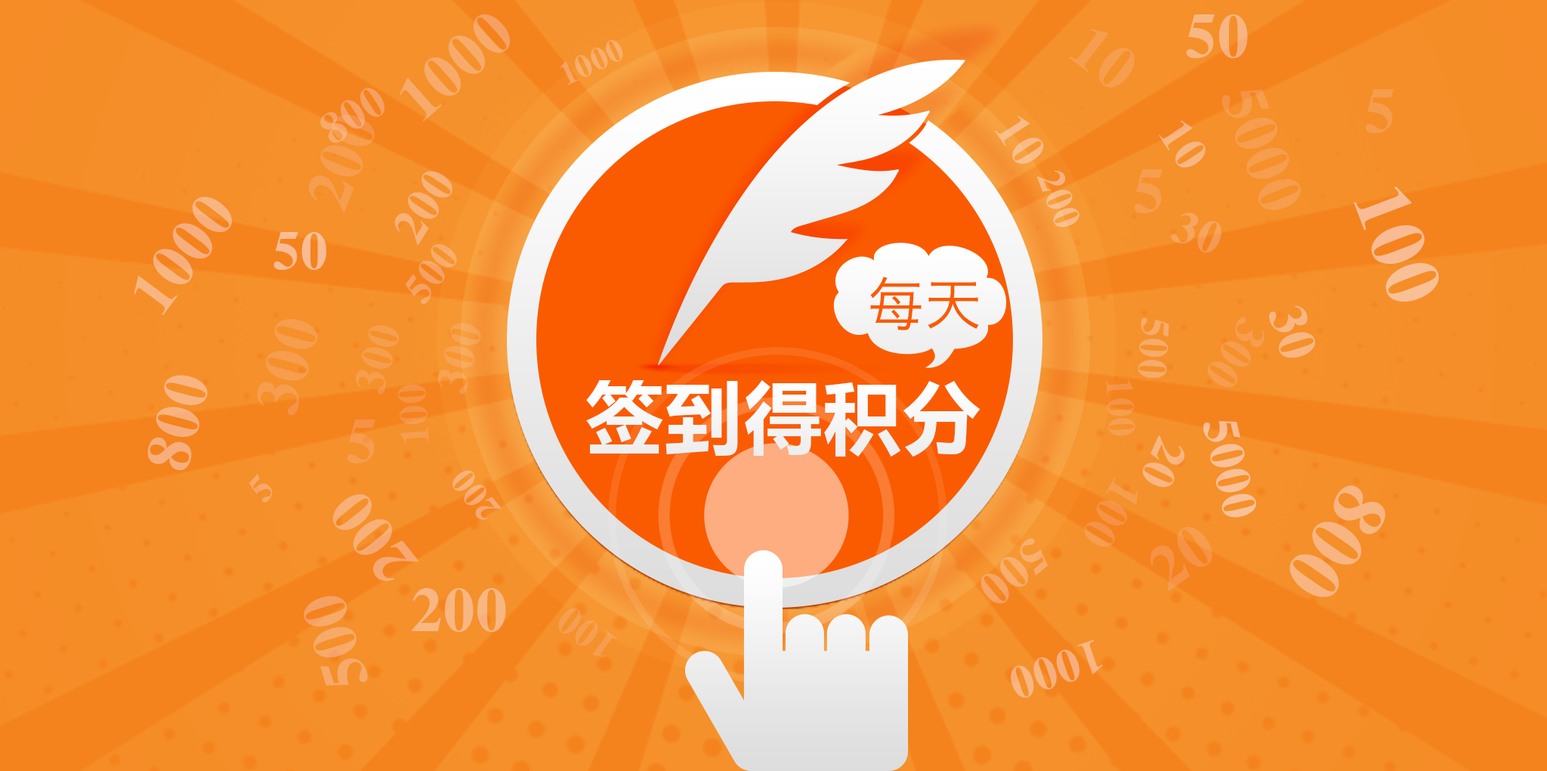
<style>
.page{position:relative;width:1547px;height:771px}
.page>*{position:absolute;margin:0}
.t1{font:62.5px "CTLaoSongSJ";letter-spacing:0.02em;color:#f7aa6a}
.t2{font:62.5px "CTLaoSongSJ";letter-spacing:0.02em;color:#f8b682}
.t3{font:62.5px "CTLaoSongSJ";letter-spacing:0.02em;color:#f69e4e}
.t4{font:32.4px "CTLaoSongSJ";letter-spacing:0.02em;color:#f8af6d}
.t5{font:44.4px "CTLaoSongSJ";letter-spacing:0.02em;color:#f6a063}
.t6{font:62.5px "CTLaoSongSJ";letter-spacing:0.02em;color:#f69d4e}
.t7{font:62.5px "CTLaoSongSJ";letter-spacing:0.02em;color:#f69c4d}
.t8{font:48px "CTLaoSongSJ";letter-spacing:0.02em;color:#f9ba85}
.t9{font:47px "CTLaoSongSJ";letter-spacing:0.02em;color:#f8b682}
.t10{font:48.4px "CTLaoSongSJ";letter-spacing:0.02em;color:#f8b177}
.t11{font:38.2px "CTLaoSongSJ";letter-spacing:0.02em;color:#f9ba85}
.t12{font:62.5px "CTLaoSongSJ";letter-spacing:0.02em;color:#f69e4f}
.t13{font:62.5px "CTLaoSongSJ";letter-spacing:0.02em;color:#f7ae7d}
.t14{font:78.2px "CTLaoSongSJ";letter-spacing:0.02em;color:#f8bb93}
.t15{font:46.8px "CTLaoSongSJ";letter-spacing:0.02em;color:#f7a45d}
.t16{font:54.1px "CTLaoSongSJ";letter-spacing:0.02em;color:#f8bb93}
.t17{font:40.9px "CTLaoSongSJ";letter-spacing:0.02em;color:#f6a264}
.t18{font:57.3px "HiraginoSansGB-W3";letter-spacing:0.02em;color:#fa5b00}
.t19{font:53.1px "CTLaoSongSJ";letter-spacing:0.02em;color:#f8b682}
.t20{font:40.7px "CTLaoSongSJ";letter-spacing:0.02em;color:#f7aa6a}
.t21{font:46.5px "CTLaoSongSJ";letter-spacing:0.02em;color:#f69d4e}
.t22{font:44.4px "CTLaoSongSJ";letter-spacing:0.02em;color:#f69e4e}
.t23{font:44.5px "CTLaoSongSJ";letter-spacing:0.02em;color:#f7a353}
.t24{font:40.1px "CTLaoSongSJ";letter-spacing:0.02em;color:#f59246}
.t25{font:78.8px "MicrosoftYaHei-Bold";letter-spacing:0.02em;color:#ffffff}
.t26{font:38.3px "CTLaoSongSJ";letter-spacing:0.02em;color:#f69e4f}
.t27{font:49.6px "CTLaoSongSJ";letter-spacing:0.02em;color:#f9c197}
.t28{font:47.5px "CTLaoSongSJ";letter-spacing:0.02em;color:#f8b682}
.t29{font:37.4px "CTLaoSongSJ";letter-spacing:0.02em;color:#f7a969}
.t30{font:35.5px "CTLaoSongSJ";letter-spacing:0.02em;color:#f8ac74}
.t31{font:46.7px "CTLaoSongSJ";letter-spacing:0.02em;color:#f59246}
.t32{font:77px "CTLaoSongSJ";letter-spacing:0.02em;color:#f8b581}
.t33{font:62.5px "CTLaoSongSJ";letter-spacing:0.02em;color:#f8b076}
.t34{font:62.5px "CTLaoSongSJ";letter-spacing:0.02em;color:#f59246}
.t35{font:48.4px "CTLaoSongSJ";letter-spacing:0.02em;color:#f7ab6a}
.t36{font:62.5px "CTLaoSongSJ";letter-spacing:0.02em;color:#f7a969}
.t37{font:40.1px "CTLaoSongSJ";letter-spacing:0.02em;color:#f69e4f}
.t38{font:47px "CTLaoSongSJ";letter-spacing:0.02em;color:#f8b27f}
</style>
<div class="page">
<p class="t1" style="left:400px;top:14px;width:110px;height:108px;rotate:-41deg">1000</p>
<p class="t2" style="left:1186px;top:14px;width:62px;height:44px">50</p>
<p class="t3" style="left:1069px;top:29px;width:66px;height:59px;rotate:38deg">10</p>
<p class="t4" style="left:559px;top:40px;width:64px;height:45px;rotate:-26deg">1000</p>
<p class="t5" style="left:320px;top:88px;width:65px;height:55px;rotate:-33deg">800</p>
<p class="t6" style="left:1222px;top:89px;width:79px;height:121px;rotate:69deg">5000</p>
<p class="t7" style="left:1365px;top:89px;width:29px;height:44px">5</p>
<p class="t6" style="left:308px;top:115px;width:67px;height:97px;rotate:-69deg">200</p>
<p class="t8" style="left:995px;top:116px;width:49px;height:48px;rotate:56deg">10</p>
<p class="t9" style="left:1159px;top:120px;width:47px;height:48px;rotate:57deg">10</p>
<p class="t10" style="left:394px;top:171px;width:59px;height:75px;rotate:-58deg">200</p>
<p class="t11" style="left:1037px;top:170px;width:43px;height:57px;rotate:69deg">200</p>
<p class="t12" style="left:1134px;top:169px;width:29px;height:44px">5</p>
<p class="t13" style="left:134px;top:196px;width:98px;height:119px;rotate:-53deg">1000</p>
<p class="t14" style="left:1354px;top:187px;width:85px;height:114px;rotate:69deg">100</p>
<p class="t15" style="left:1171px;top:212px;width:51px;height:41px;rotate:21deg">30</p>
<p class="t16" style="left:274px;top:232px;width:52px;height:38px">50</p>
<p class="t17" style="left:405px;top:244px;width:52px;height:60px;rotate:-53deg">500</p>
<p class="t18" style="left:870px;top:277px;width:109px;height:53px">每天</p>
<p class="t19" style="left:1269px;top:305px;width:46px;height:53px;rotate:72deg">30</p>
<p class="t20" style="left:1138px;top:317px;width:32px;height:61px;rotate:93deg">500</p>
<p class="t21" style="left:1207px;top:317px;width:58px;height:70px;rotate:123deg">300</p>
<p class="t6" style="left:257px;top:319px;width:61px;height:97px;rotate:-74deg">300</p>
<p class="t22" style="left:356px;top:325px;width:43px;height:69px;rotate:-74deg">300</p>
<p class="t23" style="left:437px;top:323px;width:44px;height:71px;rotate:-75deg">300</p>
<p class="t13" style="left:147px;top:375px;width:61px;height:95px;rotate:-76deg">800</p>
<p class="t24" style="left:397px;top:385px;width:32px;height:58px;rotate:-94deg">100</p>
<p class="t25" style="left:586px;top:380px;width:395px;height:76px">签到得积分</p>
<p class="t26" style="left:1106px;top:379px;width:30px;height:57px;rotate:87deg">100</p>
<p class="t6" style="left:347px;top:419px;width:28px;height:44px">5</p>
<p class="t27" style="left:1204px;top:421px;width:52px;height:97px;rotate:77deg">5000</p>
<p class="t28" style="left:1142px;top:435px;width:43px;height:52px;rotate:114deg">20</p>
<p class="t29" style="left:249px;top:474px;width:24px;height:28px;rotate:-48deg">5</p>
<p class="t30" style="left:453px;top:470px;width:49px;height:50px;rotate:-129deg">200</p>
<p class="t31" style="left:1084px;top:477px;width:55px;height:70px;rotate:120deg">100</p>
<p class="t32" style="left:1290px;top:485px;width:96px;height:112px;rotate:124deg">800</p>
<p class="t33" style="left:332px;top:494px;width:87px;height:87px;rotate:-129deg">200</p>
<p class="t34" style="left:1151px;top:527px;width:62px;height:65px;rotate:-36deg">20</p>
<p class="t35" style="left:981px;top:538px;width:67px;height:66px;rotate:140deg">500</p>
<p class="t2" style="left:412px;top:588px;width:94px;height:44px">200</p>
<p class="t36" style="left:304px;top:595px;width:64px;height:90px;rotate:-107deg">500</p>
<p class="t37" style="left:558px;top:607px;width:60px;height:50px;rotate:-144deg">100</p>
<p class="t38" style="left:1011px;top:639px;width:92px;height:58px;rotate:161deg">1000</p>
</div>
